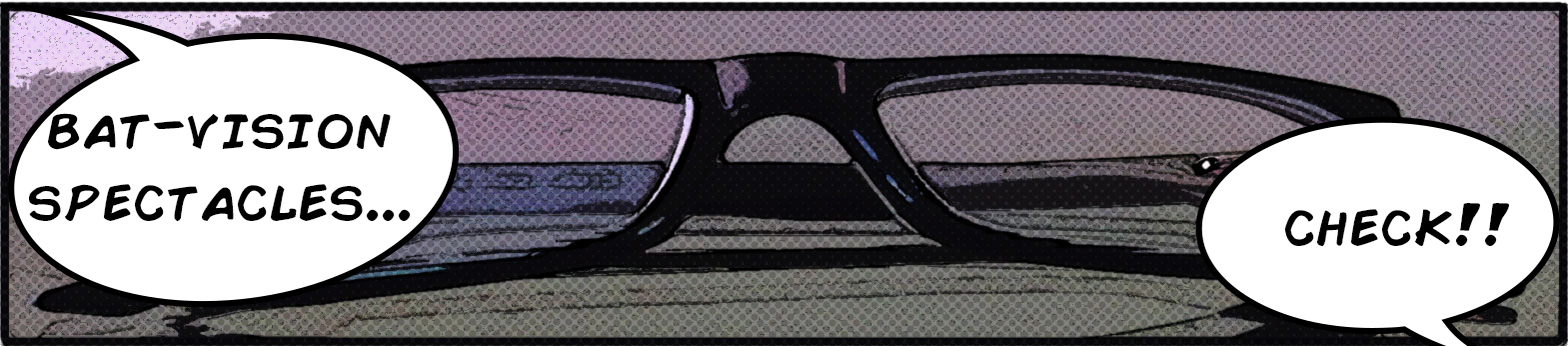
<style>
.page{position:relative;width:1568px;height:346px;background:#ffffff}
.page>*{position:absolute;margin:0}
.t1{font:60px "ComicBook";color:#000000}
</style>
<div class="page">
<p class="t1" style="left:29px;top:113px;width:382px;height:108px;text-align:center">bat-vision<br>spectacles...</p>
<p class="t1" style="left:1285px;top:203px;width:224px;height:43px">check!!</p>
</div>
